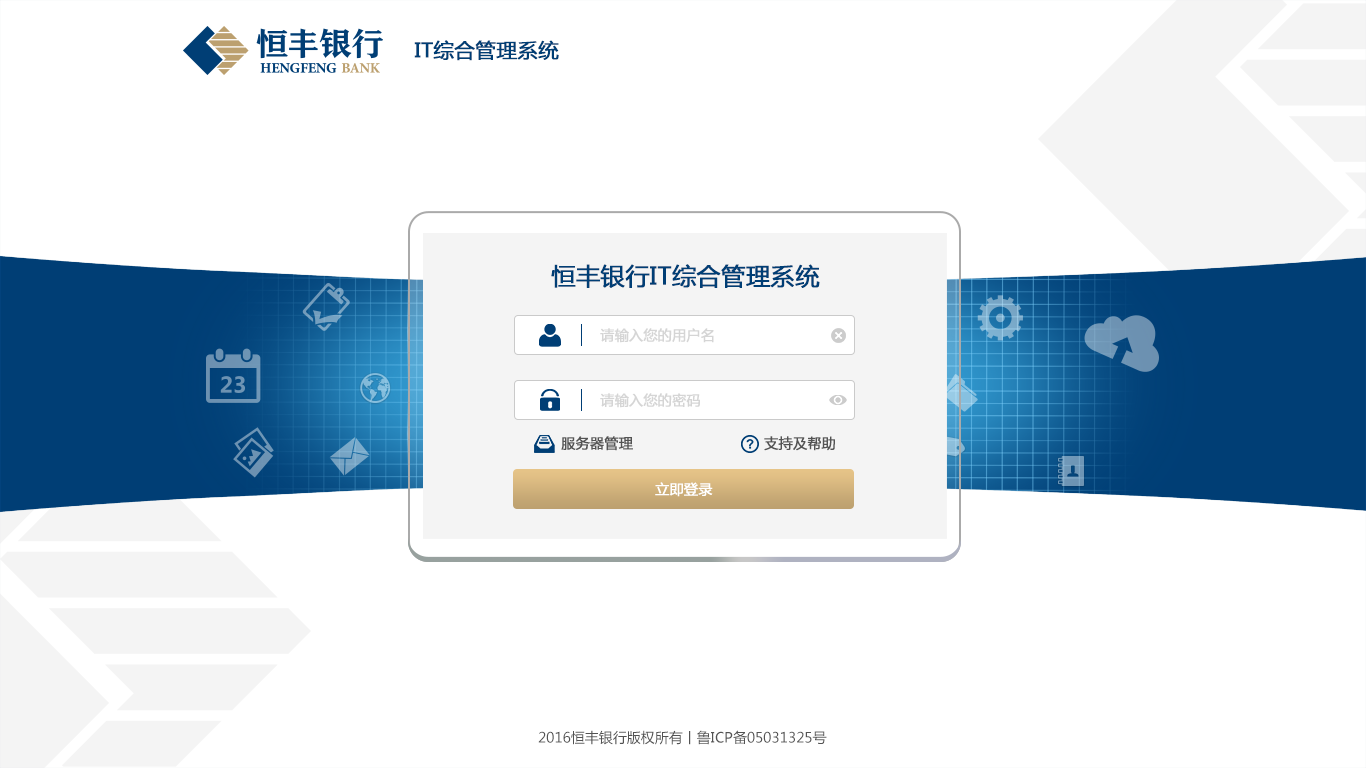
<style>
.page{position:relative;width:1366px;height:768px;background:#ffffff}
.page>*{position:absolute;margin:0}
.t1{font:20px "MicrosoftYaHei";color:#003e75;font-weight:bold}
.t2{font:24px "MicrosoftYaHei";color:#003e75;font-weight:bold}
.t3{font:14px "MicrosoftYaHei";color:#d5d5d5;font-weight:bold}
.t4{font:14px "MicrosoftYaHei";color:#535353;font-weight:bold}
.t5{font:14px "MicrosoftYaHei";color:#ffffff;font-weight:bold}
.t6{font:14px "MicrosoftYaHei";color:#535353}
</style>
<div class="page">
<p class="t1" style="left:414px;top:40px;width:145px;height:21px">IT综合管理系统</p>
<p class="t2" style="left:551px;top:264px;width:269px;height:24px">恒丰银行IT综合管理系统</p>
<p class="t3" style="left:600px;top:328px;width:114px;height:15px">请输入您的用户名</p>
<p class="t3" style="left:600px;top:393px;width:100px;height:15px">请输入您的密码</p>
<p class="t4" style="left:561px;top:436px;width:72px;height:15px">服务器管理</p>
<p class="t4" style="left:764px;top:436px;width:71px;height:15px">支持及帮助</p>
<p class="t5" style="left:655px;top:482px;width:58px;height:15px">立即登录</p>
<p class="t6" style="left:538px;top:730px;width:289px;height:15px">2016恒丰银行版权所有丨鲁ICP备05031325号</p>
</div>
